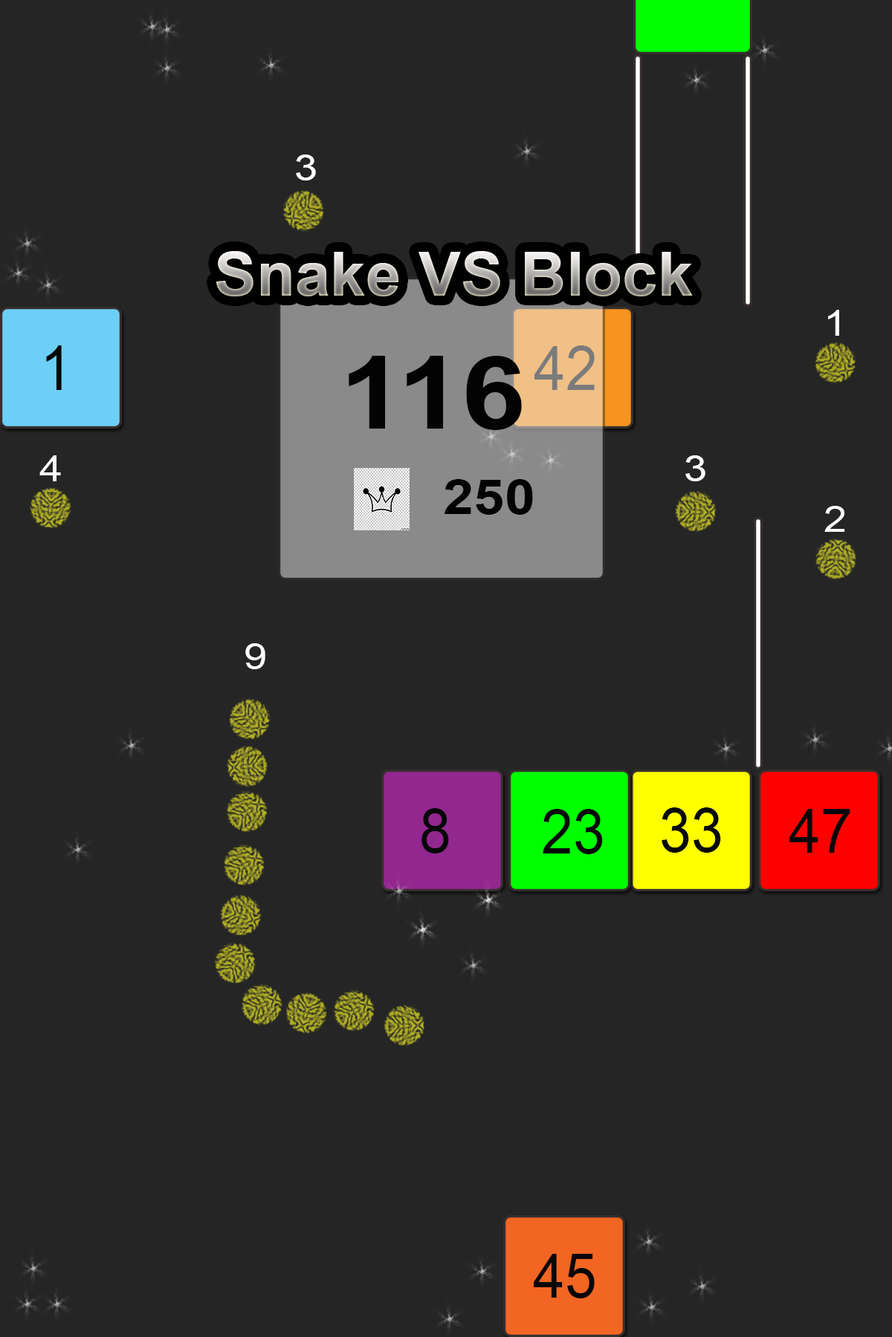
<style>
.page{position:relative;width:892px;height:1337px;background:#252525}
.page>*{position:absolute;margin:0}
.t1{font:36.1px "ArialMT";color:#ffffff;scale:1.15 1}
.t2{font:60.6px "Arial-BoldMT";scale:1.04 1}
.t3{font:62.4px "ArialMT";color:#070707;scale:0.92 1}
.t4{font:62.4px "ArialMT";color:#7b7b7b;scale:0.92 1}
.t5{font:100.3px "Arial-BoldMT";color:#030303;scale:1.15 1}
.t6{font:48.1px "Arial-BoldMT";color:#030303;scale:1.15 1}
</style>
<div class="page">
<p class="t1" style="left:296px;top:155px;width:20px;height:26px">3</p>
<p class="t2" style="left:216px;top:251px;width:476px;height:45px">Snake VS Block</p>
<p class="t1" style="left:828px;top:310px;width:11px;height:26px">1</p>
<p class="t3" style="left:46px;top:345px;width:16px;height:45px">1</p>
<p class="t4" style="left:534px;top:345px;width:60px;height:45px">42</p>
<p class="t5" style="left:348px;top:356px;width:174px;height:74px">116</p>
<p class="t1" style="left:39px;top:455px;width:22px;height:26px">4</p>
<p class="t1" style="left:685px;top:455px;width:20px;height:26px">3</p>
<p class="t6" style="left:444px;top:479px;width:89px;height:36px">250</p>
<p class="t1" style="left:245px;top:643px;width:20px;height:26px">9</p>
<p class="t3" style="left:421px;top:808px;width:28px;height:46px">8</p>
<p class="t3" style="left:542px;top:809px;width:61px;height:45px">23</p>
<p class="t3" style="left:661px;top:808px;width:60px;height:45px">33</p>
<p class="t3" style="left:789px;top:809px;width:61px;height:44px">47</p>
<p class="t3" style="left:533px;top:1254px;width:61px;height:45px">45</p>
</div>
